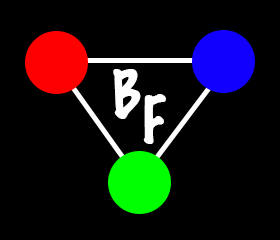
<style>
.page{position:relative;width:280px;height:240px;background:#000000}
.page>*{position:absolute;margin:0}
.t1{font:60px "MarkerFelt-Thin";color:#fefefe}
</style>
<div class="page">
<p class="t1" style="left:113px;top:69px;width:28px;height:50px">B</p>
<p class="t1" style="left:143px;top:94px;width:23px;height:50px">F</p>
</div>
